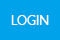
<style>
.page{position:relative;width:60px;height:40px;background:#00a2e9}
.page>*{position:absolute;margin:0}
.t1{font:13.9px "Humanist521BT-Roman";color:#ffffff;scale:0.91 1}
</style>
<div class="page">
<p class="t1" style="left:11px;top:15px;width:38px;height:10px">LOGIN</p>
</div>
